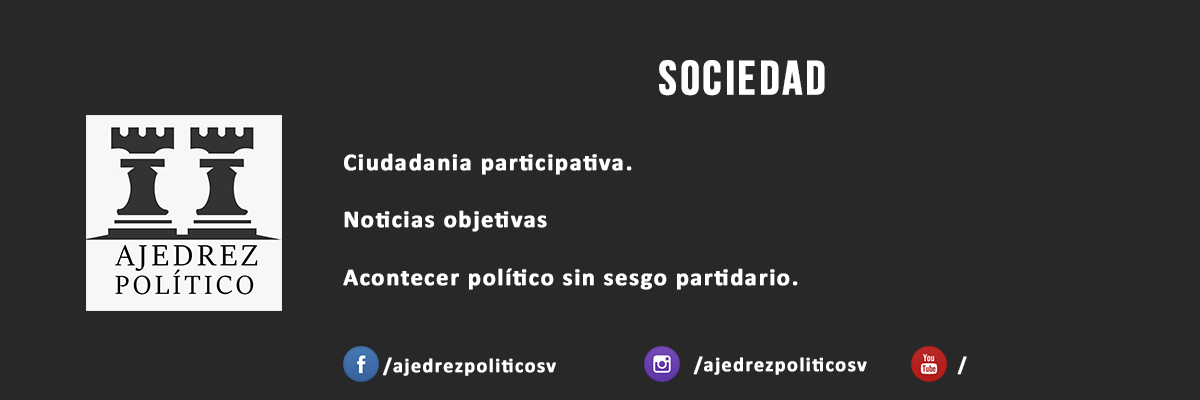
<style>
.page{position:relative;width:1200px;height:400px;background:#282828}
.page>*{position:absolute;margin:0}
.t1{font:48px "BebasNeueBold";letter-spacing:0.05em;color:#ffffff;font-weight:bold}
.t2{font:24px "Calibri-Bold";letter-spacing:0.05em;color:#ffffff;font-weight:bold}
.t3{font:20px "Calibri-Bold";letter-spacing:0.05em;color:#ffffff;font-weight:bold}
</style>
<div class="page">
<p class="t1" style="left:659px;top:60px;width:166px;height:36px">Sociedad</p>
<p class="t2" style="left:343px;top:153px;width:455px;height:137px">Ciudadania participativa.<br><br>Noticias objetivas<br><br>Acontecer político sin sesgo partidario.</p>
<p class="t3" style="left:383px;top:357px;width:173px;height:19px">/ajedrezpoliticosv</p>
<p class="t3" style="left:693px;top:356px;width:174px;height:19px">/ajedrezpoliticosv</p>
<p class="t3" style="left:957px;top:356px;width:10px;height:19px">/</p>
</div>
